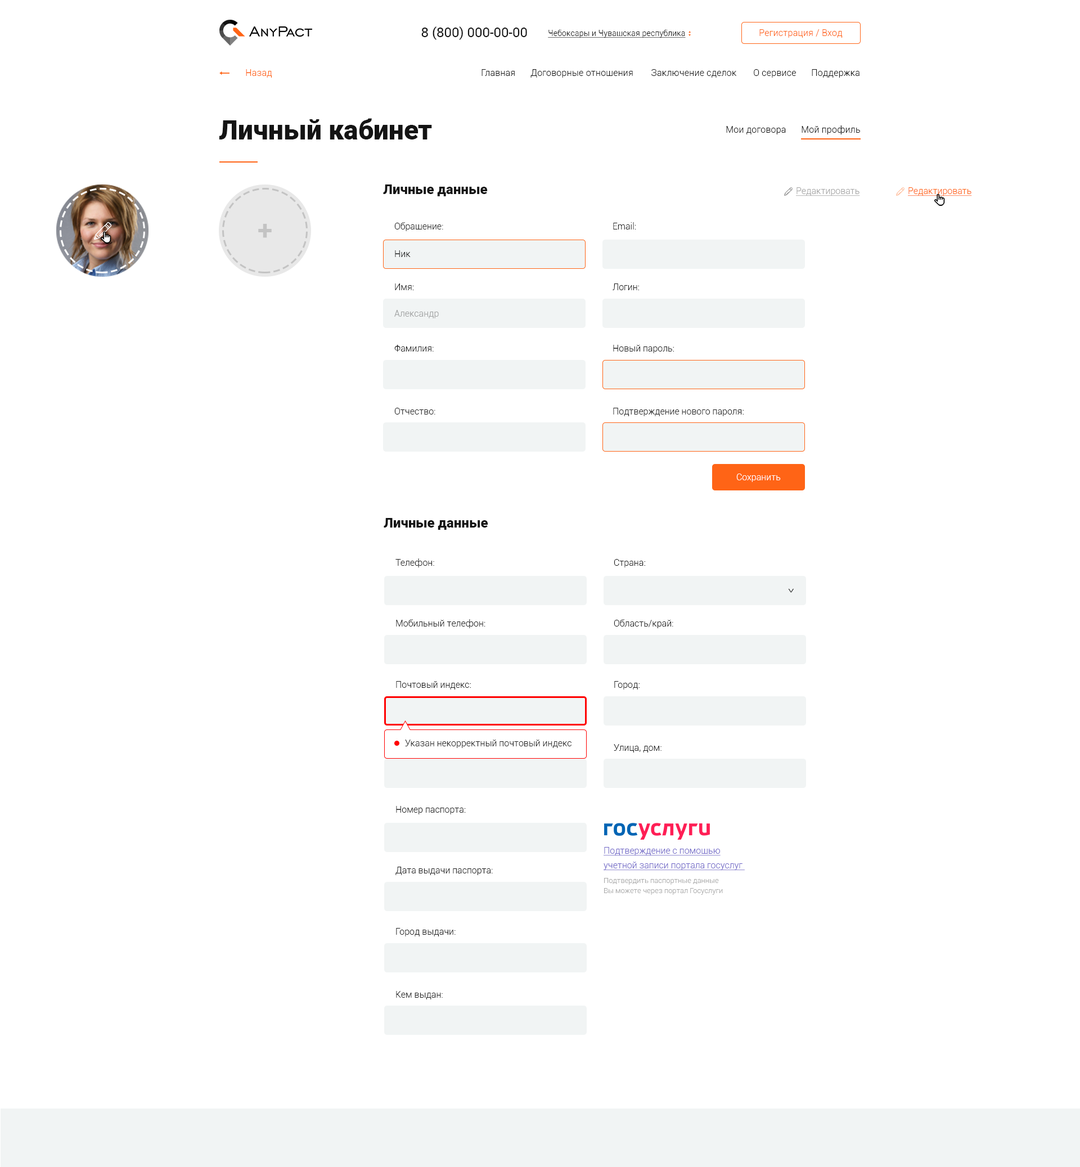
<style>
.page{position:relative;width:1080px;height:1167px;background:#ffffff}
.page>*{position:absolute;margin:0}
.t1{font:13.5px "Roboto-Regular";color:#141414}
.t2{font:7.9px "Roboto-Light";letter-spacing:0.015em;color:#131313;text-decoration:underline}
.t3{font:9px "Roboto-Light";letter-spacing:0.015em;color:#ff6416}
.t4{font:9px "Roboto-Light";letter-spacing:0.015em;color:#141414}
.t5{font:9px "Roboto-Light";letter-spacing:0.015em;color:#131313}
.t6{font:27px "Roboto-Black";color:#141414}
.t7{font:13.5px "Roboto-Black";color:#141414}
.t8{font:9px "Roboto-Light";color:#a6a6a6;text-decoration:underline}
.t9{font:9px "Roboto-Light";color:#ff6416;text-decoration:underline}
.t10{font:27px "Roboto-Bold";color:#c3c3c3}
.t11{font:9px "Roboto-Light";color:#1d1d1d}
.t12{font:9px "Roboto-Light";color:#9fa1a1}
.t13{font:9px "Roboto-Light";color:#ffffff}
.t14{font:13px "Roboto-Light";scale:0.67 1}
.t15{font:9px "Roboto-Light";color:#252525}
.t16{font:9px/14.6px "Roboto-Light";color:#7067c7;text-decoration:underline}
.t17{font:7.3px/10.1px "Roboto-Light";color:#a8a8a8}
</style>
<div class="page">
<p class="t1" style="left:421px;top:26px;width:106px;height:14px">8 (800) 000-00-00</p>
<p class="t2" style="left:548px;top:30px;width:138px;height:8px">Чебоксары и Чувашская республика</p>
<p class="t3" style="left:759px;top:29px;width:84px;height:9px">Регистрация / Вход</p>
<p class="t3" style="left:246px;top:69px;width:26px;height:9px">Назад</p>
<p class="t4" style="left:482px;top:69px;width:33px;height:7px">Главная</p>
<p class="t5" style="left:530px;top:69px;width:103px;height:9px">Договорные отношения</p>
<p class="t5" style="left:651px;top:69px;width:86px;height:9px">Заключение сделок</p>
<p class="t5" style="left:754px;top:69px;width:42px;height:9px">О сервисе</p>
<p class="t5" style="left:812px;top:69px;width:48px;height:9px">Поддержка</p>
<p class="t6" style="left:219px;top:118px;width:213px;height:22px">Личный кабинет</p>
<p class="t5" style="left:726px;top:126px;width:60px;height:8px">Мои договора</p>
<p class="t5" style="left:802px;top:125px;width:58px;height:9px">Мой профиль</p>
<p class="t7" style="left:383px;top:184px;width:105px;height:12px">Личные данные</p>
<p class="t8" style="left:796px;top:187px;width:64px;height:9px">Редактировать</p>
<p class="t9" style="left:908px;top:187px;width:64px;height:9px">Редактировать</p>
<p class="t10" style="left:258px;top:224px;width:14px;height:14px">+</p>
<p class="t11" style="left:394px;top:222px;width:49px;height:9px">Обращение:</p>
<p class="t11" style="left:613px;top:222px;width:23px;height:8px">Email:</p>
<p class="t11" style="left:395px;top:250px;width:16px;height:7px">Ник</p>
<p class="t11" style="left:395px;top:284px;width:19px;height:6px">Имя:</p>
<p class="t11" style="left:613px;top:284px;width:26px;height:6px">Логин:</p>
<p class="t12" style="left:394px;top:310px;width:45px;height:8px">Александр</p>
<p class="t11" style="left:394px;top:345px;width:40px;height:7px">Фамилия:</p>
<p class="t11" style="left:613px;top:345px;width:61px;height:8px">Новый пароль:</p>
<p class="t11" style="left:394px;top:408px;width:41px;height:7px">Отчество:</p>
<p class="t11" style="left:613px;top:408px;width:131px;height:8px">Подтверждение нового пароля:</p>
<p class="t13" style="left:736px;top:474px;width:45px;height:8px">Сохранить</p>
<p class="t7" style="left:384px;top:518px;width:104px;height:12px">Личные данные</p>
<p class="t11" style="left:395px;top:559px;width:39px;height:9px">Телефон:</p>
<p class="t11" style="left:614px;top:559px;width:31px;height:9px">Страна:</p>
<p class="t14" style="left:788px;top:588px;width:6px;height:5px;rotate:90deg">&gt;</p>
<p class="t11" style="left:396px;top:619px;width:89px;height:9px">Мобильный телефон:</p>
<p class="t11" style="left:614px;top:619px;width:59px;height:9px">Область/край:</p>
<p class="t11" style="left:396px;top:681px;width:75px;height:9px">Почтовый индекс:</p>
<p class="t11" style="left:614px;top:681px;width:26px;height:9px">Город:</p>
<p class="t15" style="left:405px;top:740px;width:167px;height:8px">Указан некорректный почтовый индекс</p>
<p class="t11" style="left:614px;top:744px;width:48px;height:9px">Улица, дом:</p>
<p class="t11" style="left:396px;top:806px;width:70px;height:8px">Номер паспорта:</p>
<p class="t16" style="left:604px;top:847px;width:141px;height:24px">Подтверждение с помощью<br>учетной записи портала госуслуг</p>
<p class="t11" style="left:395px;top:867px;width:98px;height:8px">Дата выдачи паспорта:</p>
<p class="t17" style="left:604px;top:878px;width:119px;height:17px">Подтвердить паспортные данные<br>Вы можете через портал Госуслуги</p>
<p class="t11" style="left:396px;top:928px;width:60px;height:9px">Город выдачи:</p>
<p class="t11" style="left:396px;top:991px;width:47px;height:9px">Кем выдан:</p>
</div>
